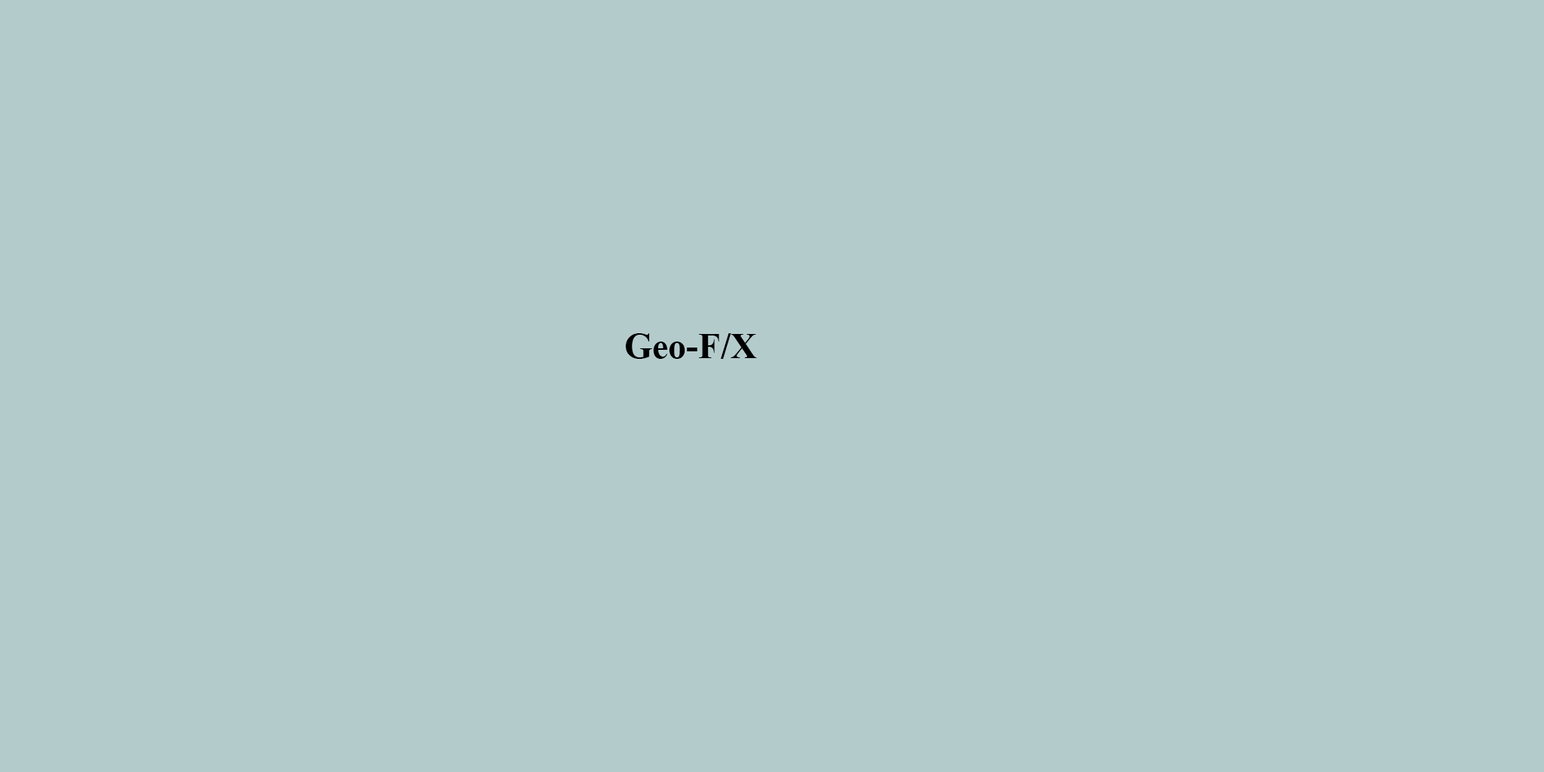
<style>
.page{position:relative;width:1544px;height:772px;background:#b4cbcc}
.page>*{position:absolute;margin:0}
.t1{font:36.2px "TimesNewRomanPS-BoldMT";color:#000000}
</style>
<div class="page">
<p class="t1" style="left:626px;top:333px;width:131px;height:26px">Geo-F/X</p>
</div>
